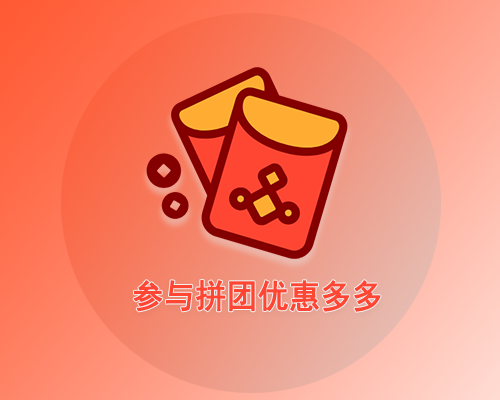
<style>
.page{position:relative;width:500px;height:400px}
.page>*{position:absolute;margin:0}
.t1{font:33.1px "SimHei";color:#ff4633;font-weight:bold;scale:0.92 1}
</style>
<div class="page">
<p class="t1" style="left:133px;top:280px;width:248px;height:32px">参与拼团优惠多多</p>
</div>
